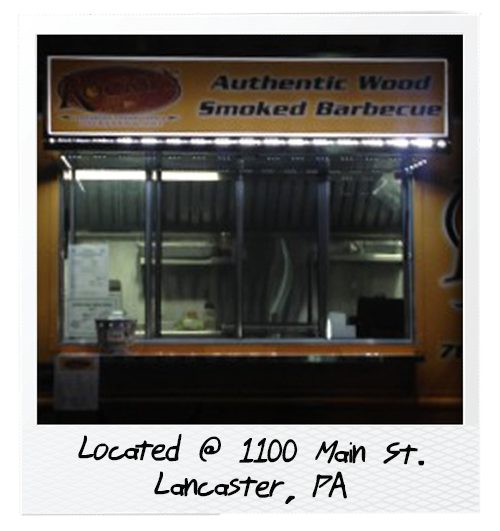
<style>
.page{position:relative;width:500px;height:531px}
.page>*{position:absolute;margin:0}
.t1{font:39.4px/34.8px "JohnnyMacScrawlBRK";letter-spacing:-0.04em;color:#070707}
</style>
<div class="page">
<p class="t1" style="left:78px;top:433px;width:346px;height:71px;text-align:center;rotate:1deg">Located @ 1100 Main St.<br>Lancaster, PA</p>
</div>
